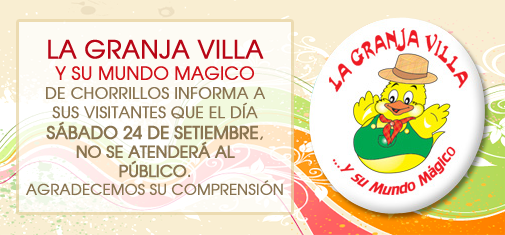
<style>
.page{position:relative;width:505px;height:235px}
.page>*{position:absolute;margin:0}
.t1{font:16px "AtillaNormal";color:#897451;font-weight:bold}
.t2{font:25px "AtillaNormal";color:#b80616;font-weight:bold}
.t3{font:18px "AtillaNormal";color:#d11119;font-weight:bold}
.t4{font:17px "AtillaBold";color:#897451;font-weight:bold}
.t5{font:17px "AtillaNormal";color:#897451;font-weight:bold}
.t6{font:16px "AtillaBold";color:#897451;font-weight:bold}
.t7{font:15px "AtillaNormal";color:#897451;font-weight:bold}
</style>
<div class="page">
<p class="t1" style="left:26px;top:39px;width:257px;height:156px;text-align:center"><span class="t2">LA GRANJA VILLA<br></span><span class="t3">Y SU MUNDO MAGICO<br></span>DE CHORRILLOS INFORMA A<br>SUS VISITANTES QUE EL DÍA<br><span class="t4">SÁBADO 24 DE SETIEMBRE</span><span class="t5">,<br></span><span class="t6">NO SE ATENDERÁ AL<br>PÚBLICO</span>.<br><span class="t7">AGRADECEMOS SU COMPRENSIÓN</span></p>
</div>
